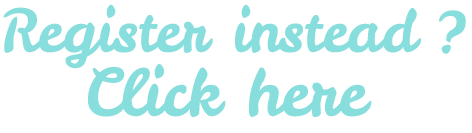
<style>
.page{position:relative;width:472px;height:133px;background:#ffffff}
.page>*{position:absolute;margin:0}
.t1{font:59px "LeckerliOne-Regular";color:#88dddd}
.t2{font:65px "LeckerliOne-Regular";color:#88dddd}
</style>
<div class="page">
<p class="t1" style="left:3px;top:4px;width:418px;height:65px">Register instead</p>
<p class="t1" style="left:439px;top:10px;width:27px;height:44px">?</p>
<p class="t2" style="left:88px;top:64px;width:284px;height:53px">Click here</p>
</div>
